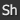
<style>
.page{position:relative;width:20px;height:20px;background:#333333}
.page>*{position:absolute;margin:0}
.t1{font:14px "Tahoma";color:#e6e6e6}
</style>
<div class="page">
<p class="t1" style="left:2px;top:4px;width:15px;height:12px">Sh</p>
</div>
